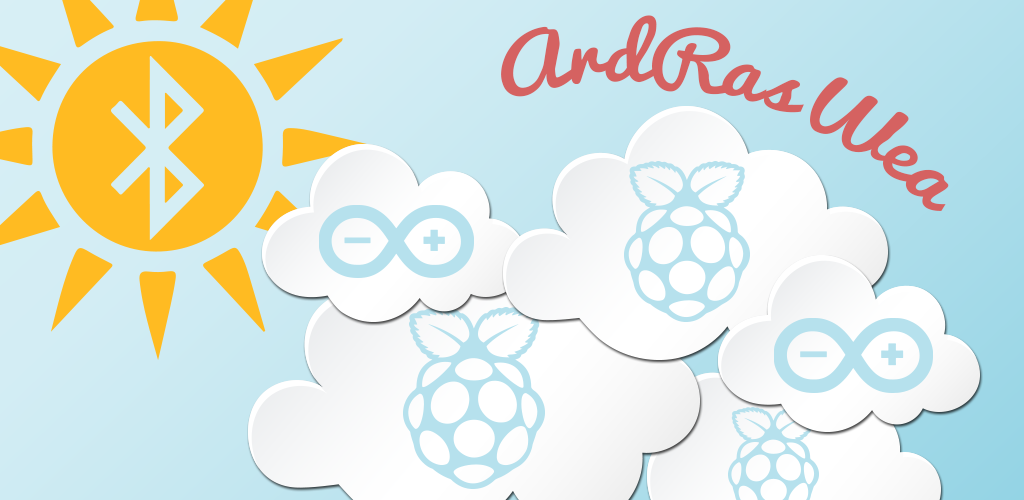
<style>
.page{position:relative;width:1024px;height:500px}
.page>*{position:absolute;margin:0}
.t1{font:72px "Pacifico";letter-spacing:0.025em;color:#d56161}
</style>
<div class="page">
<p class="t1" style="left:501px;top:15px;width:448px;height:196px;rotate:15deg">ArdRasWea</p>
</div>
